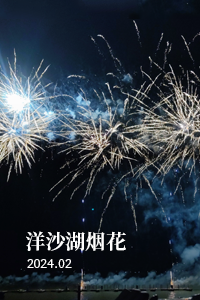
<style>
.page{position:relative;width:200px;height:300px}
.page>*{position:absolute;margin:0}
.t1{font:20.2px "SourceHanSerifCN-Bold";color:#ffffff}
.t2{font:12.5px "SourceHanSerifCN-Light";color:#ffffff}
</style>
<div class="page">
<p class="t1" style="left:26px;top:231px;width:100px;height:20px">洋沙湖烟花</p>
<p class="t2" style="left:27px;top:259px;width:45px;height:9px">2024.02</p>
</div>
